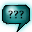
<style>
.page{position:relative;width:32px;height:32px}
.page>*{position:absolute;margin:0}
.t1{font:11px "Constantia";letter-spacing:0.02em;color:#000000;scale:1.1 1}
</style>
<div class="page">
<p class="t1" style="left:8px;top:10px;width:16px;height:9px">???</p>
</div>
